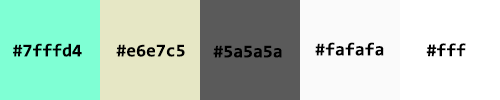
<style>
.page{position:relative;width:500px;height:100px}
.page>*{position:absolute;margin:0}
.t1{font:18px "Consolas-Bold";color:#000000}
</style>
<div class="page">
<p class="t1" style="left:13px;top:43px;width:69px;height:14px">#7fffd4</p>
<p class="t1" style="left:116px;top:44px;width:69px;height:13px">#e6e7c5</p>
<p class="t1" style="left:213px;top:45px;width:69px;height:13px">#5a5a5a</p>
<p class="t1" style="left:315px;top:42px;width:69px;height:14px">#fafafa</p>
<p class="t1" style="left:426px;top:43px;width:40px;height:14px">#fff</p>
</div>
